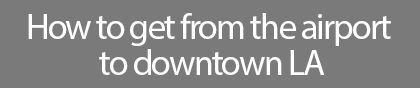
<style>
.page{position:relative;width:420px;height:88px;background:#7a7a7a}
.page>*{position:absolute;margin:0}
.t1{font:36px/36px "MyriadPro-Regular";letter-spacing:-0.05em;color:#ffffff}
</style>
<div class="page">
<p class="t1" style="left:28px;top:13px;width:363px;height:62px;text-align:center">How to get from the airport <br>to downtown LA</p>
</div>
